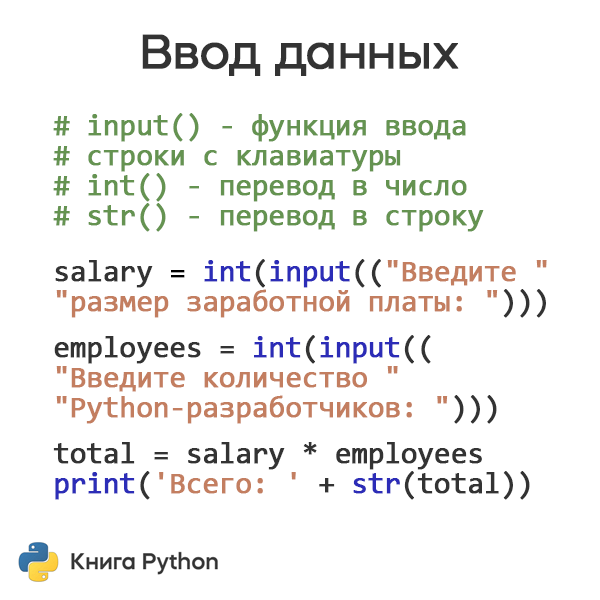
<style>
.page{position:relative;width:600px;height:600px;background:#ffffff}
.page>*{position:absolute;margin:0}
.t1{font:48px "MazzardH-Regular";letter-spacing:-0.025em;color:#333333;font-weight:bold}
.t2{font:30px/30px "Consolas";letter-spacing:-0.025em;color:#659351;font-weight:bold}
.t3{font:30px/30px "Consolas";letter-spacing:-0.025em;color:#333333;font-weight:bold}
.t4{font:30px/30px "Consolas";letter-spacing:-0.025em;color:#000000;font-weight:bold}
.t5{font:30px/30px "Consolas";letter-spacing:-0.025em;color:#2c2db7;font-weight:bold}
.t6{font:30px/30px "Consolas";letter-spacing:-0.025em;color:#c37e60;font-weight:bold}
.t7{font:30px/30px "Consolas";letter-spacing:-0.025em;color:#2c2cb7;font-weight:bold}
</style>
<div class="page">
<p class="t1" style="left:142px;top:34px;width:317px;height:42px">Ввод данных</p>
<p class="t2" style="left:53px;top:113px;width:494px;height:387px"># input() - функция ввода<br># строки с клавиатуры<br># int() - перевод в число<br># str() - перевод в строку<br><br><br><span class="t3">salary </span><span class="t4">=</span><span class="t5"> int</span><span class="t3">(</span><span class="t5">input</span><span class="t3">((</span><span class="t6">"Введите "<br>"размер заработной платы: "</span><span class="t3">)))<br><br>employees = </span><span class="t7">int</span><span class="t3">(</span><span class="t7">input</span><span class="t3">((<br></span><span class="t6">"Введите количество "<br>"Python-разработчиков: "</span><span class="t3">)))<br><br>total = salary * employees<br></span><span class="t5">print</span><span class="t3">(</span><span class="t6">'Всего: ' </span><span class="t3">+ </span><span class="t7">str</span><span class="t3">(total))</span></p>
</div>
